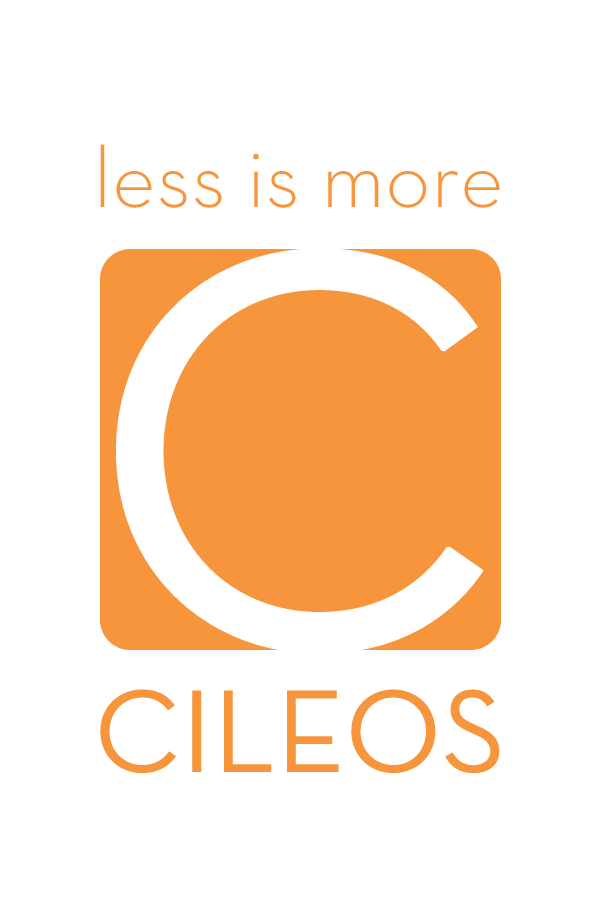
<style>
.page{position:relative;width:600px;height:900px;background:#ffffff}
.page>*{position:absolute;margin:0}
.t1{font:86.4px "NeutraText-Light";color:#f7953c}
.t2{font:576.4px "NeutraText-Book";color:#ffffff;font-weight:bold}
.t3{font:119.7px "NeutraText-Book";color:#f7953c}
</style>
<div class="page">
<p class="t1" style="left:100px;top:144px;width:400px;height:64px">less is more</p>
<p class="t2" style="left:116px;top:248px;width:368px;height:406px">C</p>
<p class="t3" style="left:100px;top:689px;width:400px;height:84px">CILEOS</p>
</div>
